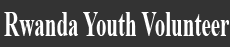
<style>
.page{position:relative;width:230px;height:47px;background:#333333}
.page>*{position:absolute;margin:0}
.t1{font:36.2px "TimesNewRomanPS-BoldMT";color:#ffffff;scale:0.58 1}
</style>
<div class="page">
<p class="t1" style="left:4px;top:12px;width:225px;height:24px">Rwanda Youth Volunteer</p>
</div>
